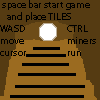
<style>
.page{position:relative;width:100px;height:100px;background:#553b12}
.page>*{position:absolute;margin:0}
.t1{font:10px "MyriadPro-Regular";color:#000000}
</style>
<div class="page">
<p class="t1" style="left:2px;top:0px;width:88px;height:22px">space bar start game<br>  and place TILES</p>
<p class="t1" style="left:0px;top:25px;width:26px;height:31px">WASD <br>move <br>cursor</p>
<p class="t1" style="left:67px;top:25px;width:29px;height:31px">CTRL<br>miners<br>run</p>
</div>
